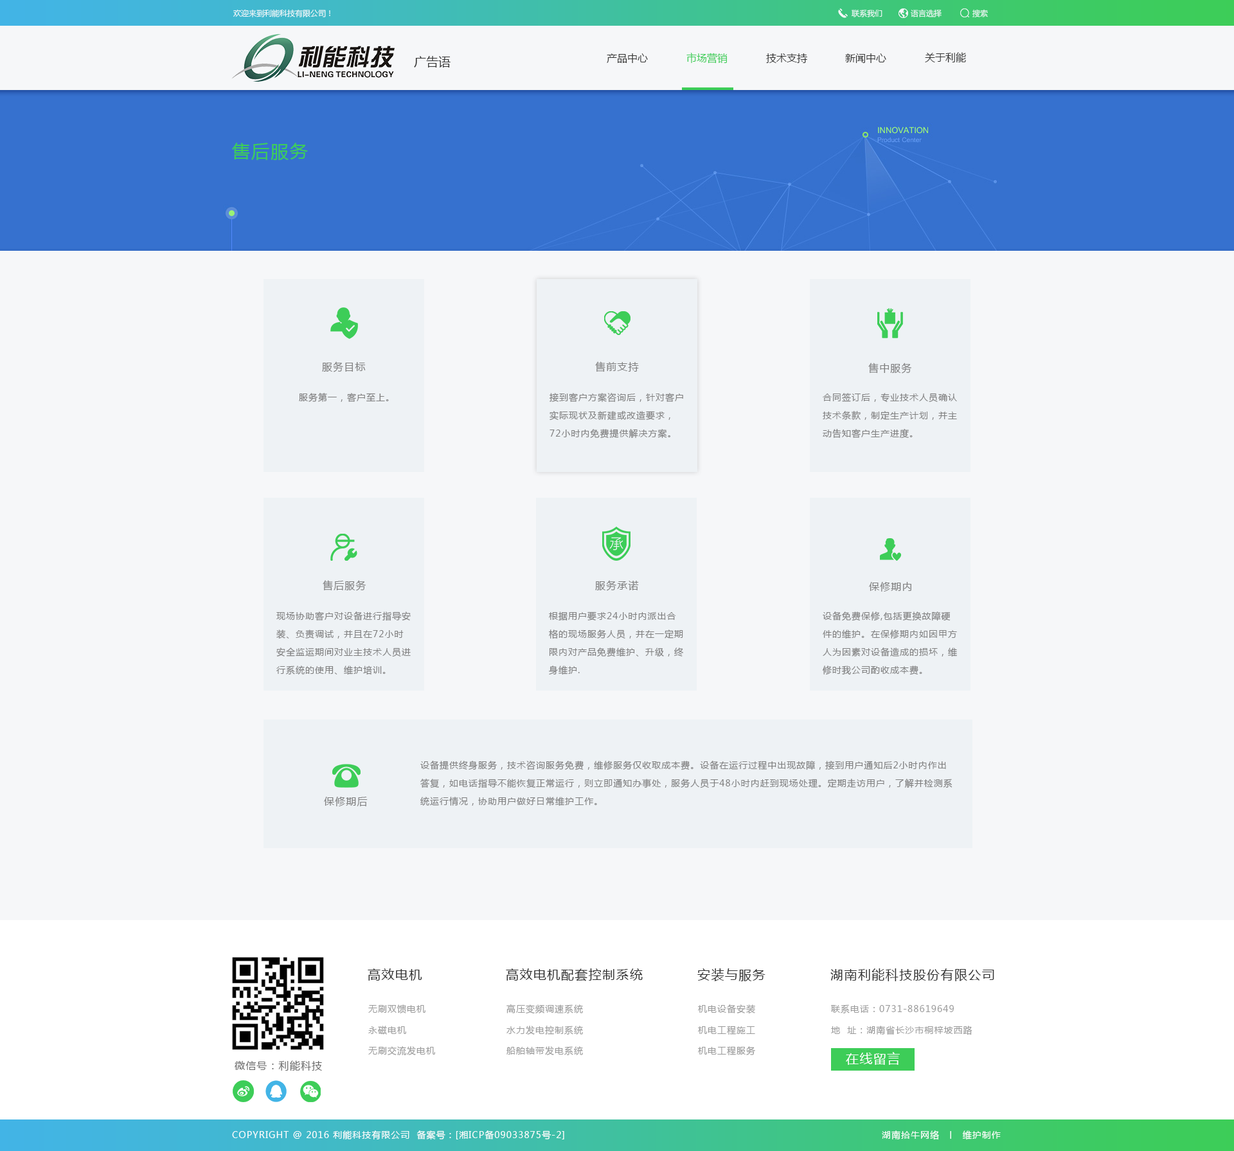
<style>
.page{position:relative;width:1234px;height:1151px;background:#f6f7f9}
.page>*{position:absolute;margin:0}
.t1{font:7.7px "MicrosoftYaHei";color:#f6f7f9}
.t2{font:10.3px "MicrosoftYaHei";color:#343434}
.t3{font:10.3px "MicrosoftYaHei";color:#3dcd58}
.t4{font:12.2px "MicrosoftYaHei";color:#343434}
.t5{font:18px "MicrosoftYaHei";letter-spacing:0.072em;color:#3dcd58}
.t6{font:10.3px "MicrosoftYaHei";letter-spacing:0.072em;color:#7f7f7f}
.t7{font:9px "MicrosoftYaHei";letter-spacing:0.072em;color:#7f7f7f}
.t8{font:9px/18px "MicrosoftYaHei";letter-spacing:0.072em;color:#7f7f7f}
.t9{font:12.9px "MicrosoftYaHei";letter-spacing:0.072em;color:#323232}
.t10{font:9px "MicrosoftYaHei";letter-spacing:0.072em;color:#9a9a9a}
.t11{font:10.3px "MicrosoftYaHei";letter-spacing:0.072em;color:#676767}
.t12{font:12.9px "MicrosoftYaHei";letter-spacing:0.072em;color:#ffffff}
.t13{font:9px "MicrosoftYaHei";letter-spacing:0.072em;color:#ffffff}
</style>
<div class="page">
<p class="t1" style="left:233px;top:9px;width:97px;height:8px">欢迎来到利能科技有限公司！</p>
<p class="t1" style="left:851px;top:10px;width:32px;height:7px">联系我们</p>
<p class="t1" style="left:911px;top:9px;width:31px;height:8px">语言选择</p>
<p class="t1" style="left:973px;top:9px;width:15px;height:8px">搜索</p>
<p class="t2" style="left:607px;top:53px;width:41px;height:10px">产品中心</p>
<p class="t3" style="left:687px;top:53px;width:41px;height:11px">市场营销</p>
<p class="t2" style="left:766px;top:53px;width:41px;height:10px">技术支持</p>
<p class="t2" style="left:845px;top:53px;width:42px;height:10px">新闻中心</p>
<p class="t2" style="left:925px;top:52px;width:41px;height:10px">关于利能</p>
<p class="t4" style="left:414px;top:56px;width:37px;height:12px">广告语</p>
<p class="t5" style="left:232px;top:143px;width:76px;height:17px">售后服务</p>
<p class="t6" style="left:322px;top:361px;width:44px;height:11px">服务目标</p>
<p class="t6" style="left:595px;top:361px;width:44px;height:11px">售前支持</p>
<p class="t6" style="left:869px;top:363px;width:43px;height:11px">售中服务</p>
<p class="t7" style="left:299px;top:393px;width:90px;height:9px">服务第一，客户至上。</p>
<p class="t8" style="left:549px;top:393px;width:134px;height:45px">接到客户方案咨询后，针对客户实际现状及新建或改造要求，72小时内免费提供解决方案。</p>
<p class="t8" style="left:823px;top:393px;width:134px;height:45px">合同签订后，专业技术人员确认技术条款，制定生产计划，并主动告知客户生产进度。</p>
<p class="t6" style="left:323px;top:580px;width:43px;height:11px">售后服务</p>
<p class="t6" style="left:595px;top:580px;width:44px;height:11px">服务承诺</p>
<p class="t6" style="left:869px;top:582px;width:43px;height:9px">保修期内</p>
<p class="t8" style="left:276px;top:611px;width:135px;height:64px">现场协助客户对设备进行指导安装、负责调试，并且在72小时安全监运期间对业主技术人员进行系统的使用、维护培训。</p>
<p class="t8" style="left:549px;top:611px;width:134px;height:64px">根据用户要求24小时内派出合格的现场服务人员，并在一定期限内对产品免费维护、升级，终身维护.</p>
<p class="t8" style="left:823px;top:611px;width:134px;height:64px">设备免费保修,包括更换故障硬件的维护。在保修期内如因甲方人为因素对设备造成的损坏，维修时我公司酌收成本费。</p>
<p class="t8" style="left:420px;top:760px;width:533px;height:46px">设备提供终身服务，技术咨询服务免费，维修服务仅收取成本费。设备在运行过程中出现故障，接到用户通知后2小时内作出答复，如电话指导不能恢复正常运行，则立即通知办事处，服务人员于48小时内赶到现场处理。定期走访用户，了解并检测系统运行情况，协助用户做好日常维护工作。</p>
<p class="t6" style="left:324px;top:797px;width:44px;height:9px">保修期后</p>
<p class="t9" style="left:368px;top:968px;width:54px;height:12px">高效电机</p>
<p class="t9" style="left:506px;top:968px;width:137px;height:13px">高效电机配套控制系统</p>
<p class="t9" style="left:698px;top:968px;width:68px;height:13px">安装与服务</p>
<p class="t9" style="left:831px;top:968px;width:164px;height:13px">湖南利能科技股份有限公司</p>
<p class="t10" style="left:368px;top:1004px;width:58px;height:9px">无刷双馈电机</p>
<p class="t10" style="left:507px;top:1004px;width:76px;height:10px">高压变频调速系统</p>
<p class="t10" style="left:698px;top:1004px;width:57px;height:9px">机电设备安装</p>
<p class="t10" style="left:831px;top:1004px;width:123px;height:9px">联系电话：0731-88619649</p>
<p class="t10" style="left:368px;top:1025px;width:38px;height:9px">永磁电机</p>
<p class="t10" style="left:507px;top:1025px;width:76px;height:9px">水力发电控制系统</p>
<p class="t10" style="left:698px;top:1025px;width:57px;height:10px">机电工程施工</p>
<p class="t10" style="left:831px;top:1025px;width:142px;height:10px">地  址：湖南省长沙市桐梓坡西路</p>
<p class="t10" style="left:368px;top:1046px;width:67px;height:10px">无刷交流发电机</p>
<p class="t10" style="left:507px;top:1046px;width:76px;height:9px">船舶轴带发电系统</p>
<p class="t10" style="left:698px;top:1046px;width:57px;height:10px">机电工程服务</p>
<p class="t11" style="left:235px;top:1060px;width:87px;height:11px">微信号：利能科技</p>
<p class="t12" style="left:846px;top:1052px;width:54px;height:13px">在线留言</p>
<p class="t13" style="left:232px;top:1130px;width:332px;height:10px">COPYRIGHT @ 2016 利能科技有限公司  备案号：[湘ICP备09033875号-2]</p>
<p class="t13" style="left:882px;top:1130px;width:119px;height:10px">湖南拾牛网络  丨  维护制作</p>
</div>
